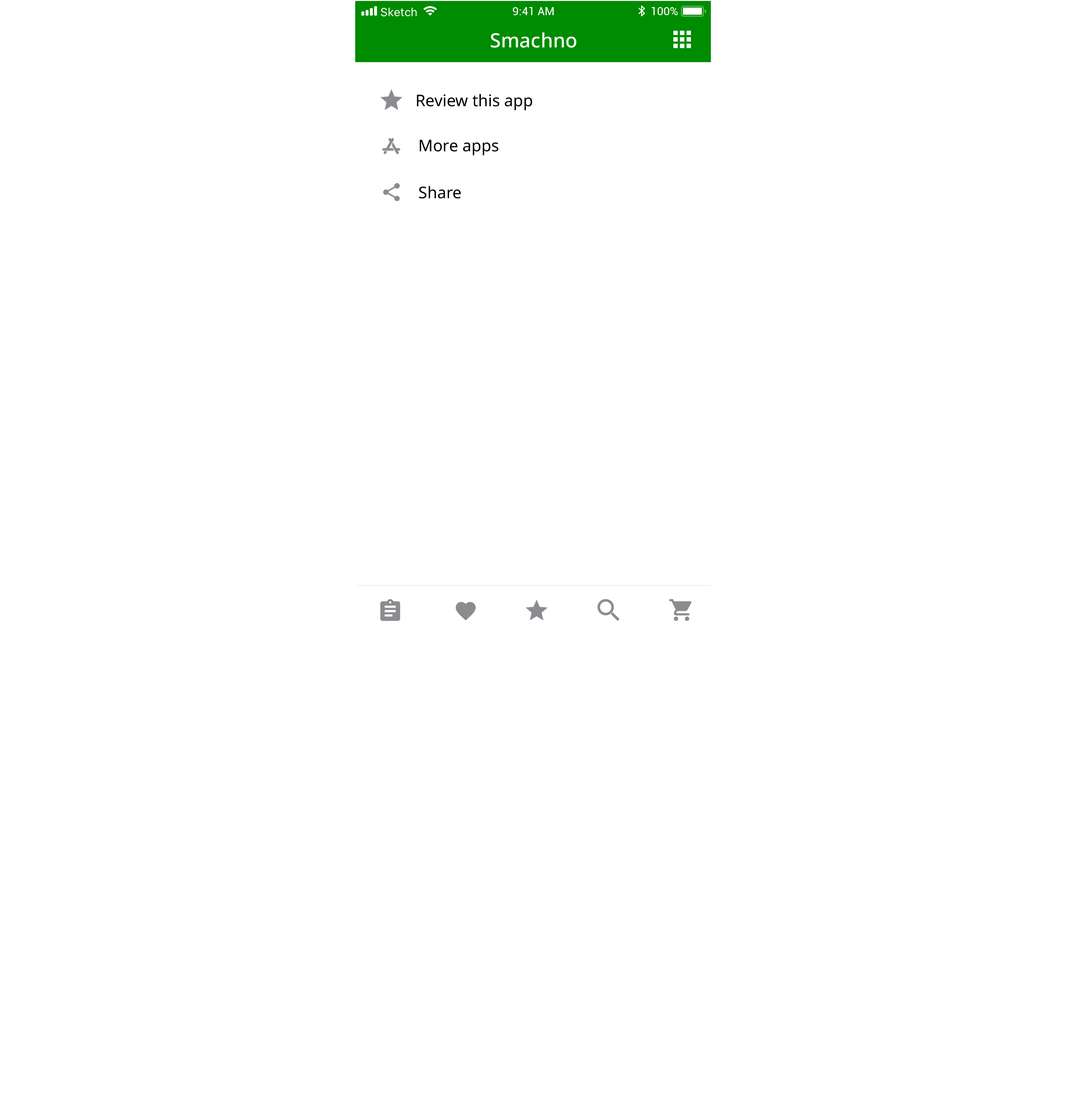
<style>
.page{position:relative;width:1067px;height:1118px;background:#ffffff}
.page>*{position:absolute;margin:0}
.t1{font:19.8px "NotoSans-Medium";color:#ffffff}
.t2{font:16.1px "NotoSans-Regular";color:#000000}
</style>
<div class="page">
<p class="t1" style="left:491px;top:32px;width:86px;height:16px">Smachno</p>
<p class="t2" style="left:417px;top:94px;width:115px;height:16px">Review this app</p>
<p class="t2" style="left:420px;top:139px;width:78px;height:17px">More apps</p>
<p class="t2" style="left:419px;top:186px;width:42px;height:13px">Share</p>
</div>
